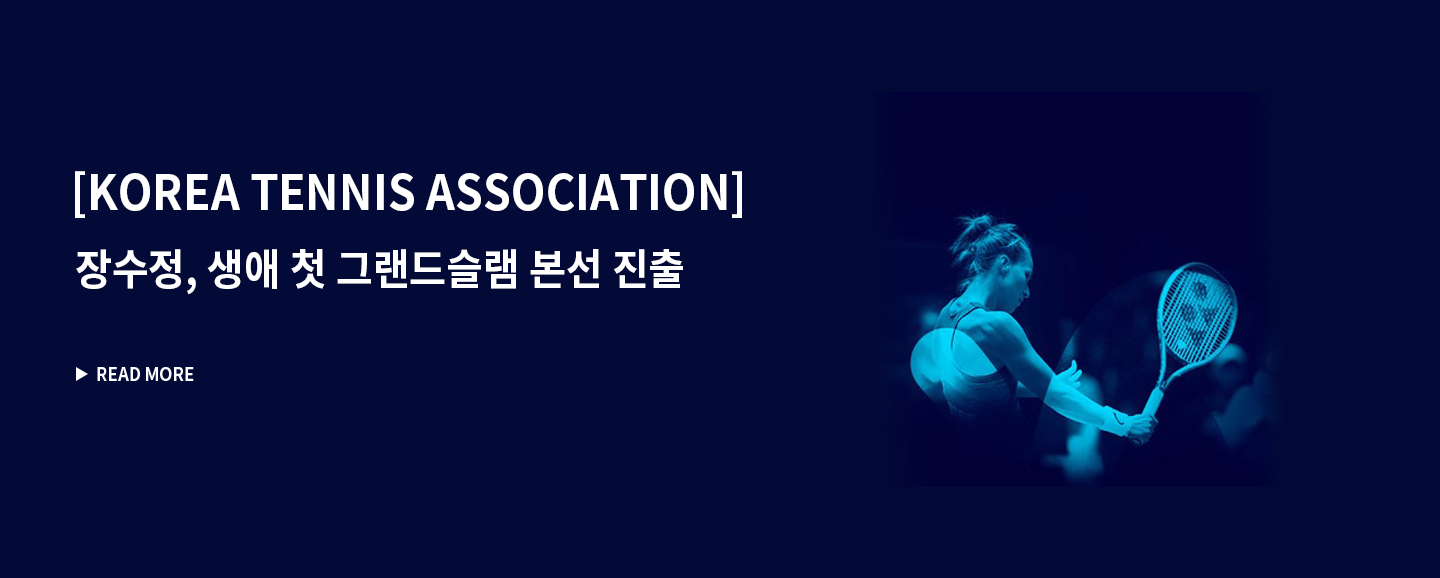
<style>
.page{position:relative;width:1440px;height:578px;background:#030a38}
.page>*{position:absolute;margin:0}
.t1{font:48.2px "NotoSansKR-Bold";color:#ffffff;scale:0.93 1}
.t2{font:42.8px "NotoSansKR-Bold";color:#ffffff;scale:0.93 1}
</style>
<div class="page">
<p class="t1" style="left:75px;top:171px;width:667px;height:47px">[KOREA TENNIS ASSOCIATION]</p>
<p class="t2" style="left:76px;top:249px;width:607px;height:46px">장수정, 생애 첫 그랜드슬램 본선 진출</p>
</div>
